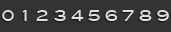
<style>
.page{position:relative;width:171px;height:32px;background:#333333}
.page>*{position:absolute;margin:0}
.t1{font:15px "BlairMdITCTTMedium";color:#dddfdd}
.t2{font:15px "BlairMdITCTTMedium";color:#dcdedc}
.t3{font:15px "BlairMdITCTTMedium";color:#dee3de}
.t4{font:15px "BlairMdITCTTMedium";color:#dde0dd}
.t5{font:15px "BlairMdITCTTMedium";color:#dde1dd}
.t6{font:15px "BlairMdITCTTMedium";color:#dadddb}
</style>
<div class="page">
<p class="t1" style="left:2px;top:10px;width:12px;height:11px">0</p>
<p class="t2" style="left:22px;top:10px;width:5px;height:11px">1</p>
<p class="t3" style="left:36px;top:10px;width:12px;height:11px">2</p>
<p class="t4" style="left:54px;top:10px;width:12px;height:11px">3</p>
<p class="t5" style="left:71px;top:10px;width:13px;height:11px">4</p>
<p class="t1" style="left:88px;top:10px;width:12px;height:11px">5</p>
<p class="t1" style="left:105px;top:10px;width:13px;height:11px">6</p>
<p class="t6" style="left:122px;top:10px;width:12px;height:11px">7</p>
<p class="t4" style="left:139px;top:10px;width:13px;height:11px">8</p>
<p class="t1" style="left:157px;top:10px;width:12px;height:11px">9</p>
</div>
